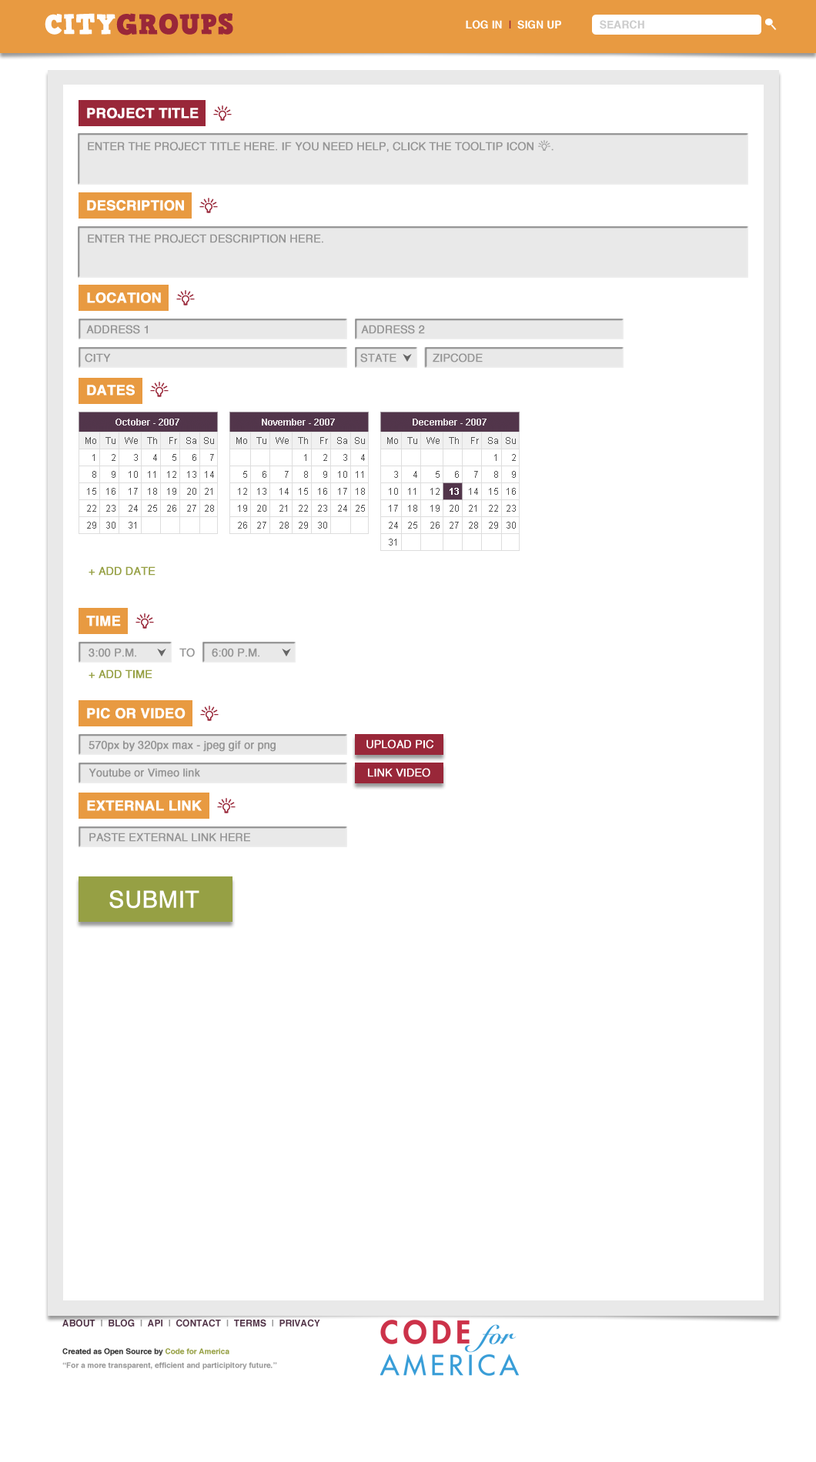
<style>
.page{position:relative;width:816px;height:1462px;background:#ffffff}
.page>*{position:absolute;margin:0}
.t1{font:27.7px "HVDComicSerifPro";color:#992739;text-transform:uppercase;font-weight:bold}
.t2{font:27.7px "HVDComicSerifPro";color:#fefefe;text-transform:uppercase;font-weight:bold}
.t3{font:10.8px "Helvetica-Bold";color:#ffffff;text-transform:uppercase}
.t4{font:10.8px "Helvetica-Bold";color:#992739;text-transform:uppercase}
.t5{font:10.8px "Helvetica-Bold";color:#cccccc;text-transform:uppercase}
.t6{font:10.8px "Helvetica";color:#959595;text-transform:uppercase;font-weight:bold}
.t7{font:10.8px "Helvetica";color:#96a044;text-transform:uppercase;font-weight:bold}
.t8{font:10.8px "Helvetica";color:#959595;font-weight:bold}
.t9{font:10.8px "Helvetica";color:#ffffff;font-weight:bold}
.t10{font:23.1px "Helvetica";color:#ffffff;font-weight:bold}
.t11{font:7.7px/13.9px "Helvetica-Bold";color:#999999}
.t12{font:9.2px/13.9px "Helvetica-Bold";color:#533549;text-transform:uppercase}
.t13{font:9.2px/13.9px "Helvetica-Bold";color:#999999;text-transform:uppercase}
.t14{font:7.7px/13.9px "Helvetica-Bold";color:#333333}
.t15{font:7.7px/13.9px "Helvetica-Bold";color:#96a044}
</style>
<div class="page">
<p class="t1" style="left:45px;top:13px;width:188px;height:22px"><span class="t2">City</span>Groups</p>
<p class="t3" style="left:466px;top:20px;width:95px;height:9px">log in  <span class="t4">|</span>  SIGN up</p>
<p class="t5" style="left:599px;top:20px;width:45px;height:9px">search</p>
<p class="t6" style="left:88px;top:142px;width:465px;height:10px">ENTER THE PROJECT TITLE HERE. IF YOU NEED HELP, CLICK THE TOOLTIP ICON     .</p>
<p class="t6" style="left:88px;top:234px;width:235px;height:9px">ENTER THE PROJECT DESCRIPTION HERE.</p>
<p class="t6" style="left:86px;top:325px;width:62px;height:9px">ADDRESS 1</p>
<p class="t6" style="left:361px;top:325px;width:64px;height:9px">ADDRESS 2</p>
<p class="t6" style="left:85px;top:353px;width:26px;height:9px">CITY</p>
<p class="t6" style="left:360px;top:353px;width:36px;height:9px">STATE</p>
<p class="t6" style="left:432px;top:353px;width:50px;height:9px">ZIPCODE</p>
<p class="t7" style="left:88px;top:566px;width:67px;height:10px">+ ADD DATE</p>
<p class="t6" style="left:88px;top:648px;width:48px;height:9px">3:00 P.M.</p>
<p class="t6" style="left:179px;top:648px;width:16px;height:9px">TO</p>
<p class="t6" style="left:212px;top:648px;width:47px;height:9px">6:00 P.M.</p>
<p class="t7" style="left:88px;top:669px;width:64px;height:10px">+ ADD TIME</p>
<p class="t8" style="left:88px;top:740px;width:187px;height:12px">570px by 320px max - jpeg gif or png</p>
<p class="t9" style="left:366px;top:739px;width:67px;height:10px">UPLOAD PIC</p>
<p class="t8" style="left:88px;top:768px;width:112px;height:9px">Youtube or Vimeo link</p>
<p class="t9" style="left:368px;top:768px;width:62px;height:9px">LINK VIDEO</p>
<p class="t8" style="left:89px;top:833px;width:161px;height:9px">PASTE EXTERNAL LINK HERE</p>
<p class="t10" style="left:109px;top:890px;width:90px;height:19px">SUBMIT</p>
<p class="t11" style="left:62px;top:1319px;width:258px;height:51px"><span class="t12">About  </span><span class="t13">|  </span><span class="t12">blog  </span><span class="t13">|  </span><span class="t12">api  </span><span class="t13">|  </span><span class="t12">Contact  </span><span class="t13">|  </span><span class="t12">terms  </span><span class="t13">|  </span><span class="t12">Privacy<br><br></span><span class="t14">Created as Open Source by </span><span class="t15">Code for America<br></span>“For a more transparent, efficient and participitory future.”</p>
</div>
